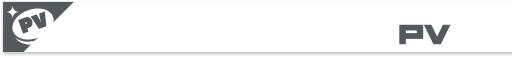
<style>
.page{position:relative;width:512px;height:58px;background:#fffeff}
.page>*{position:absolute;margin:0}
.t1{font:18.7px "RaglanStd-UB";color:#525a5c}
</style>
<div class="page">
<p class="t1" style="left:18px;top:11px;width:29px;height:23px;rotate:-19deg">PV</p>
</div>
